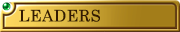
<style>
.page{position:relative;width:180px;height:32px}
.page>*{position:absolute;margin:0}
.t1{font:16px "CenturySchoolbook";letter-spacing:0.025em;color:#321a02}
</style>
<div class="page">
<p class="t1" style="left:19px;top:9px;width:81px;height:13px">LEADERS</p>
</div>
